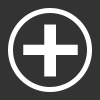
<style>
.page{position:relative;width:100px;height:100px;background:#333333}
.page>*{position:absolute;margin:0}
.t1{font:91.4px "RodinNTLGPro-DB";letter-spacing:0.02em;color:#ffffff;font-weight:bold}
</style>
<div class="page">
<p class="t1" style="left:23px;top:24px;width:55px;height:53px">+</p>
</div>
